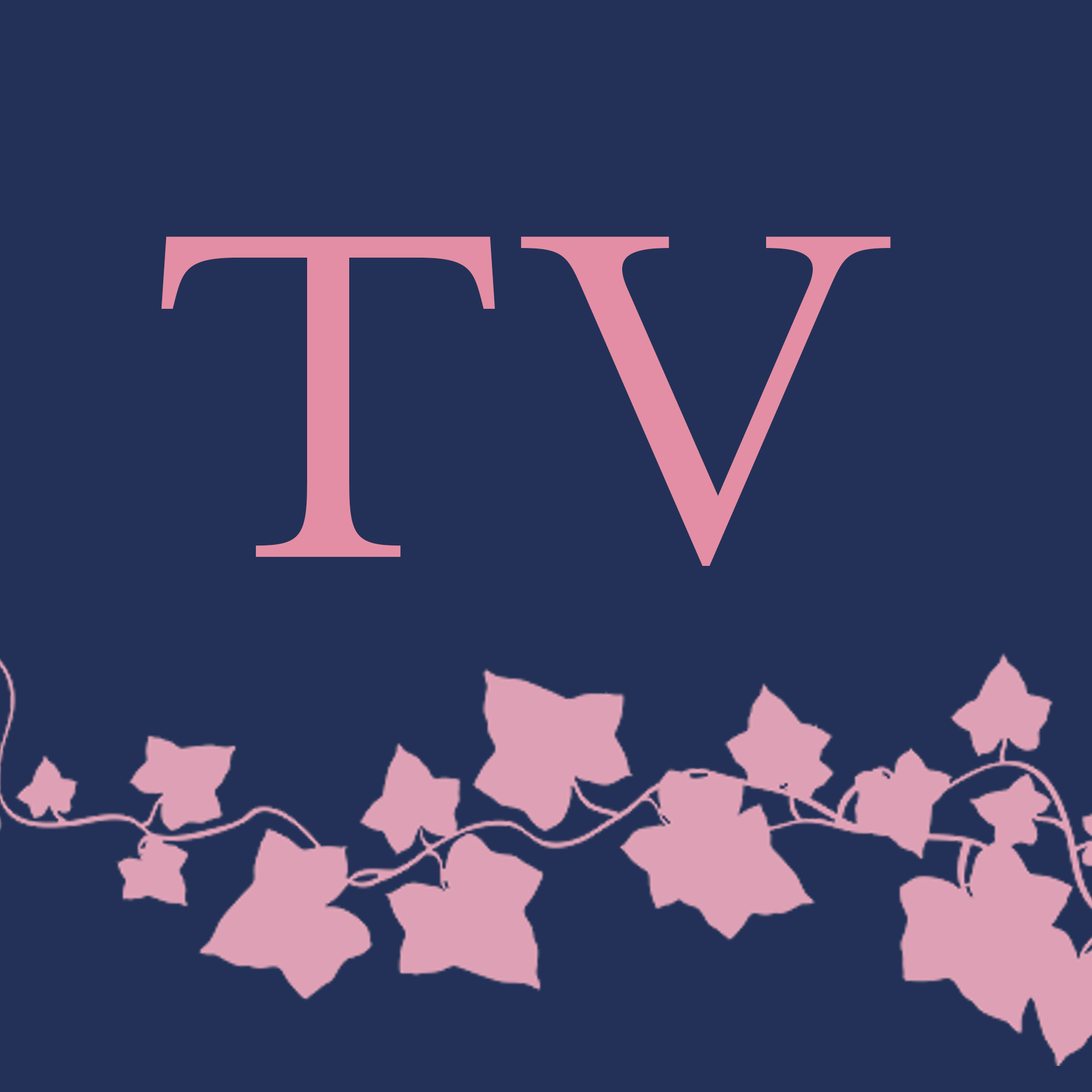
<style>
.page{position:relative;width:1092px;height:1092px;background:#233158}
.page>*{position:absolute;margin:0}
.t1{font:533.4px "MrsEavesOT-Roman";letter-spacing:0.08em;color:#e38ea4}
</style>
<div class="page">
<p class="t1" style="left:161px;top:237px;width:730px;height:329px">TV</p>
</div>
